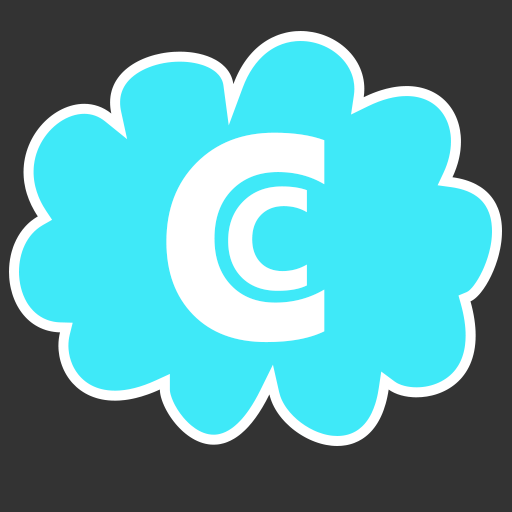
<style>
.page{position:relative;width:512px;height:512px;background:#3fe9f8}
.page>*{position:absolute;margin:0}
.t1{font:288.8px "MicrosoftNewTaiLue-Bold";letter-spacing:-0.05em;color:#ffffff}
.t2{font:144.4px "MicrosoftNewTaiLue-Bold";letter-spacing:-0.05em;color:#fefefe}
</style>
<div class="page">
<p class="t1" style="left:166px;top:132px;width:159px;height:211px">C</p>
<p class="t2" style="left:228px;top:186px;width:79px;height:105px">C</p>
</div>
